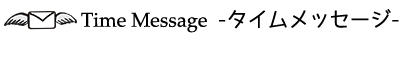
<style>
.page{position:relative;width:400px;height:75px;background:#ffffff}
.page>*{position:absolute;margin:0}
.t1{font:20px "PalatinoLinotype-Roman";color:#000000}
.t2{font:20px "07YasashisaGothic";color:#000000}
</style>
<div class="page">
<p class="t1" style="left:81px;top:9px;width:318px;height:24px">Time Message  <span class="t2">-タイムメッセージ-</span></p>
</div>
